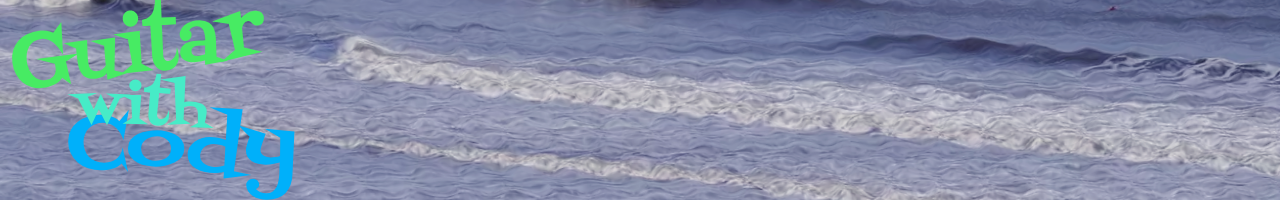
<style>
.page{position:relative;width:1280px;height:200px}
.page>*{position:absolute;margin:0}
.t1{font:78.3px "FontdinerSwanky-Regular";color:#47eb63;scale:0.95 1}
.t2{font:56px "FontdinerSwanky-Regular";color:#47ebc7;scale:1.04 1}
.t3{font:74.7px "FontdinerSwanky-Regular";color:#00b0fa;scale:1.1 1}
</style>
<div class="page">
<p class="t1" style="left:11px;top:0px;width:254px;height:89px;rotate:-8deg">Guitar</p>
<p class="t2" style="left:67px;top:73px;width:147px;height:55px">with</p>
<p class="t3" style="left:68px;top:107px;width:227px;height:93px">Cody</p>
</div>
